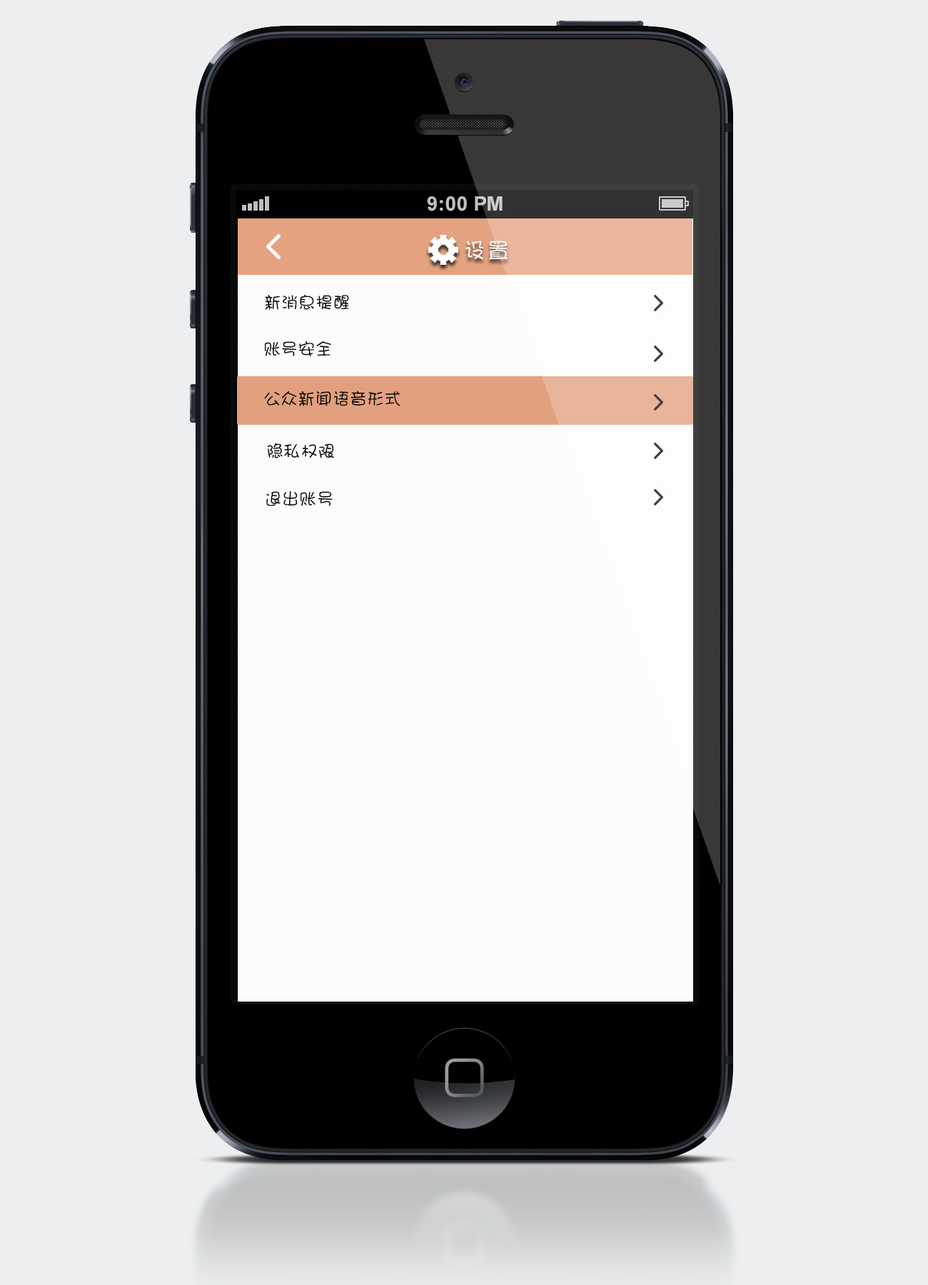
<style>
.page{position:relative;width:928px;height:1285px;background:#eceeef}
.page>*{position:absolute;margin:0}
.t1{font:21.4px "DFPShaoNvW5";letter-spacing:0.1em;color:#faf5f5}
.t2{font:17.1px "DFPShaoNvW5";letter-spacing:0.005em;color:#0b0b0b}
</style>
<div class="page">
<p class="t1" style="left:465px;top:241px;width:43px;height:19px">设置</p>
<p class="t2" style="left:265px;top:294px;width:84px;height:16px">新消息提醒</p>
<p class="t2" style="left:264px;top:341px;width:67px;height:15px">账号安全</p>
<p class="t2" style="left:264px;top:390px;width:136px;height:16px">公众新闻语音形式</p>
<p class="t2" style="left:267px;top:443px;width:67px;height:15px">隐私权限</p>
<p class="t2" style="left:266px;top:490px;width:67px;height:16px">退出账号</p>
</div>
